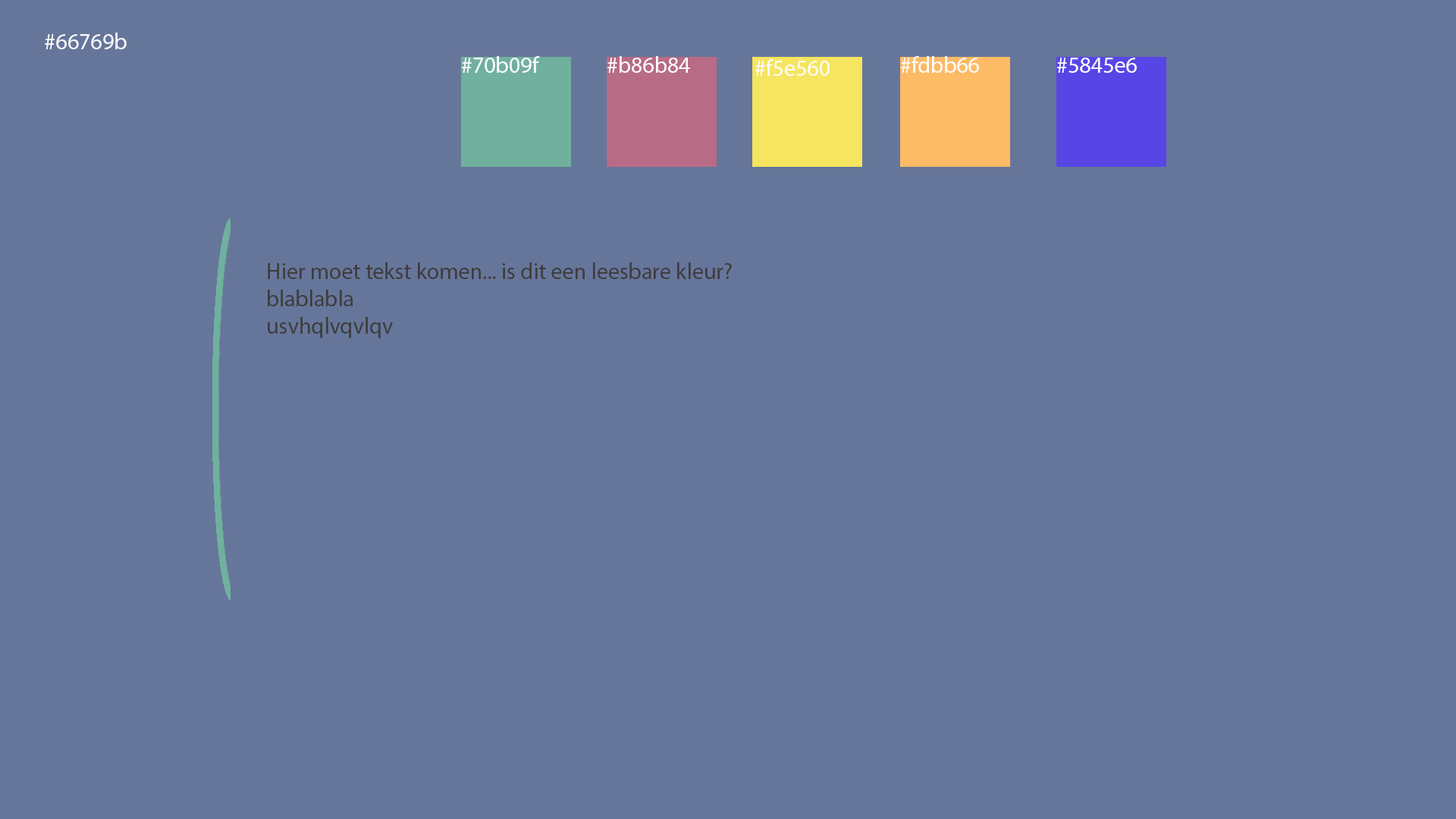
<style>
.page{position:relative;width:1456px;height:819px;background:#66769b}
.page>*{position:absolute;margin:0}
.t1{font:22.7px "MyriadPro-Regular";color:#fcfcfc}
.t2{font:22.7px "MyriadPro-Regular";color:#3e3d3d}
</style>
<div class="page">
<p class="t1" style="left:45px;top:33px;width:82px;height:16px">#66769b</p>
<p class="t1" style="left:462px;top:56px;width:78px;height:17px">#70b09f</p>
<p class="t1" style="left:607px;top:56px;width:83px;height:17px">#b86b84</p>
<p class="t1" style="left:755px;top:59px;width:75px;height:17px">#f5e560</p>
<p class="t1" style="left:901px;top:56px;width:78px;height:17px">#fdbb66</p>
<p class="t1" style="left:1057px;top:58px;width:80px;height:15px">#5845e6</p>
<p class="t2" style="left:268px;top:262px;width:464px;height:76px">Hier moet tekst komen... is dit een leesbare kleur?<br>blablabla<br>usvhqlvqvlqv</p>
</div>
